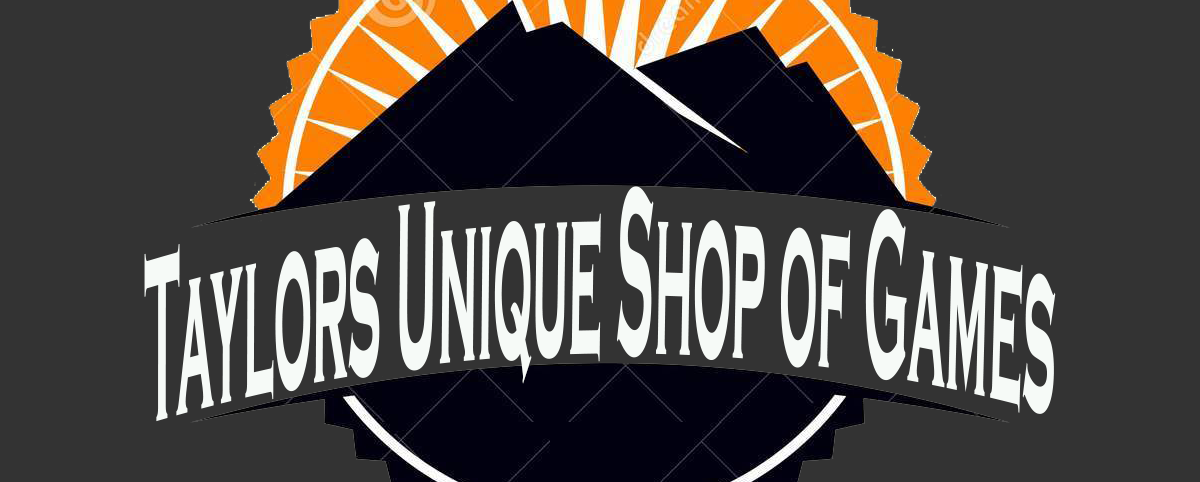
<style>
.page{position:relative;width:1200px;height:482px;background:#333333}
.page>*{position:absolute;margin:0}
.t1{font:245.3px "CopperplateGothic-Bold";color:#f6faf7;scale:0.22 1}
</style>
<div class="page">
<p class="t1" style="left:144px;top:186px;width:912px;height:236px;rotate:-1deg">Taylors Unique Shop of Games</p>
</div>
